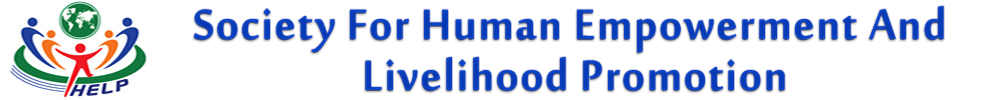
<style>
.page{position:relative;width:982px;height:100px;background:#ffffff}
.page>*{position:absolute;margin:0}
.t1{font:64.9px/51px "MoolBoran";letter-spacing:0.024em;color:#0a3fbd}
</style>
<div class="page">
<p class="t1" style="left:193px;top:5px;width:751px;height:86px">Society For Human Empowerment And<br>                 Livelihood Promotion</p>
</div>
